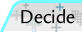
<style>
.page{position:relative;width:82px;height:32px;background:#dddddd}
.page>*{position:absolute;margin:0}
.t1{font:18.7px "Amira-Roman";color:#000000}
</style>
<div class="page">
<p class="t1" style="left:21px;top:9px;width:54px;height:15px;opacity:0.96">Decide</p>
</div>
